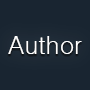
<style>
.page{position:relative;width:90px;height:90px;background:#192531}
.page>*{position:absolute;margin:0}
.t1{font:25px "Dotum";letter-spacing:-0.01em;color:#ffffff}
</style>
<div class="page">
<p class="t1" style="left:8px;top:36px;width:74px;height:18px">Author</p>
</div>
